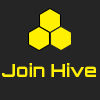
<style>
.page{position:relative;width:100px;height:100px;background:#262525}
.page>*{position:absolute;margin:0}
.t1{font:18px "Orbitron-Bold";color:#fff004}
</style>
<div class="page">
<p class="t1" style="left:2px;top:63px;width:94px;height:14px">Join Hive</p>
</div>
